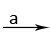
<style>
.page{position:relative;width:50px;height:50px;background:#ffffff}
.page>*{position:absolute;margin:0}
.t1{font:20px "Calibri";color:#000000}
</style>
<div class="page">
<p class="t1" style="left:9px;top:15px;width:9px;height:9px">a</p>
</div>
